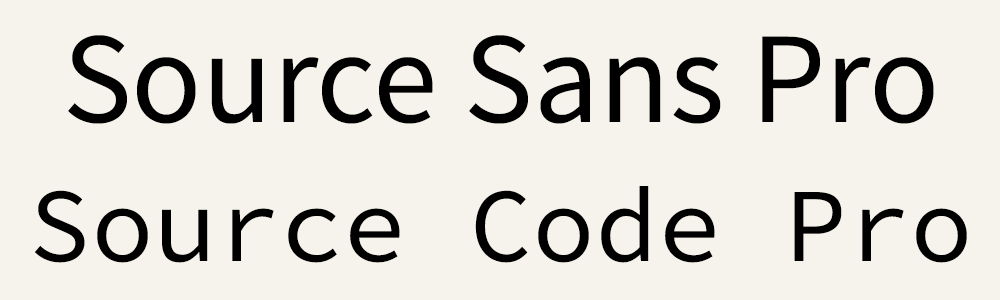
<style>
.page{position:relative;width:1000px;height:300px;background:#f5f3eb}
.page>*{position:absolute;margin:0}
.t1{font:130px "SourceSansPro-Regular";color:#000000}
.t2{font:105px "SourceCodePro-Regular";color:#000000}
</style>
<div class="page">
<p class="t1" style="left:68px;top:35px;width:866px;height:89px">Source Sans Pro</p>
<p class="t2" style="left:35px;top:186px;width:932px;height:77px">Source Code Pro</p>
</div>
